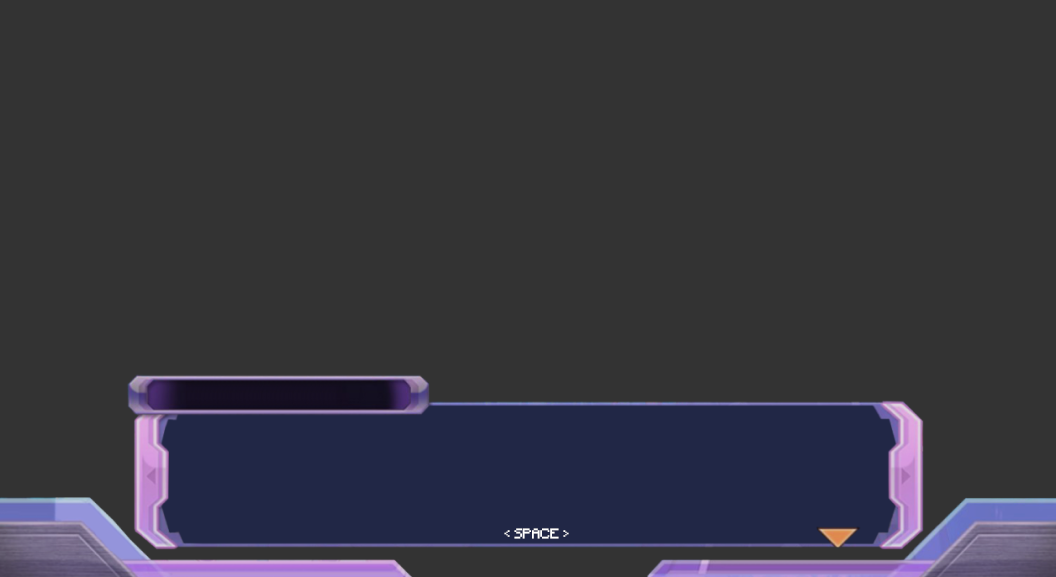
<style>
.page{position:relative;width:1056px;height:577px;background:#333333}
.page>*{position:absolute;margin:0}
.t1{font:13.3px "Minecraft";color:#ffffff}
</style>
<div class="page">
<p class="t1" style="left:504px;top:528px;width:65px;height:11px">&lt; SPACE &gt;</p>
</div>
